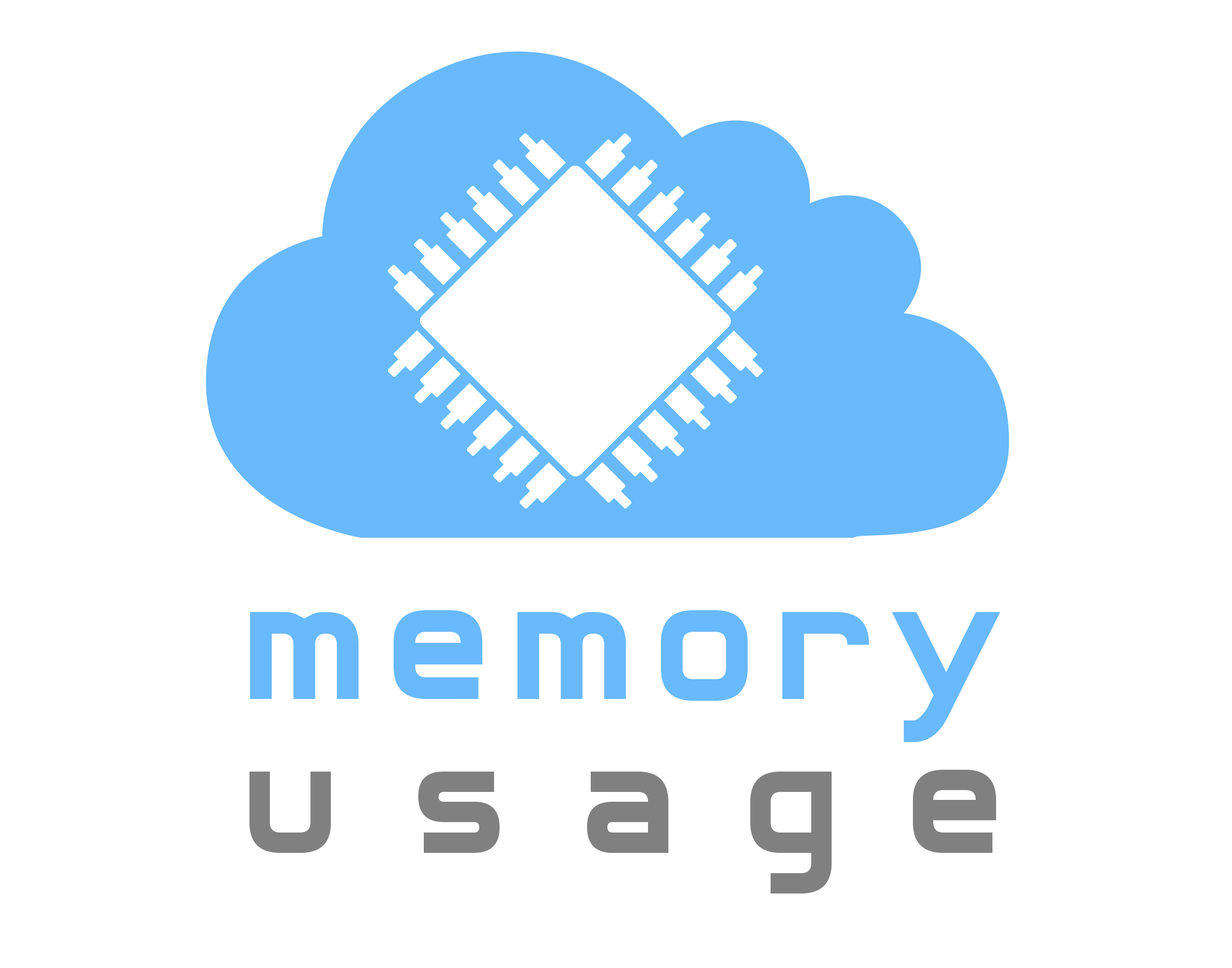
<style>
.page{position:relative;width:1232px;height:968px;background:#ffffff}
.page>*{position:absolute;margin:0}
.t1{font:197px/154px "Archangelsk";letter-spacing:0.117em;color:#68b9fd}
.t2{font:184.7px/154px "Archangelsk";letter-spacing:0.414em;color:#808080}
</style>
<div class="page">
<p class="t1" style="left:249px;top:610px;width:751px;height:284px;text-align:center">memory<br><span class="t2">usage</span></p>
</div>
